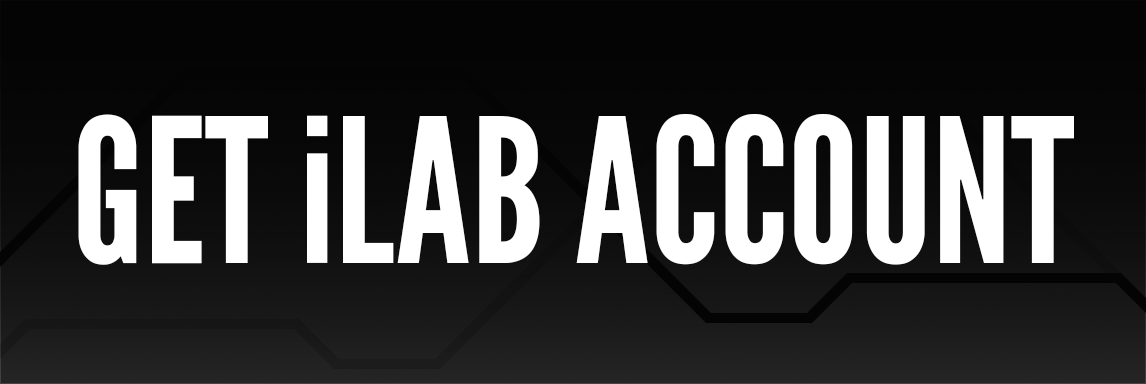
<style>
.page{position:relative;width:1146px;height:384px}
.page>*{position:absolute;margin:0}
.t1{font:200px "LeagueGothic-Regular";color:#ffffff}
</style>
<div class="page">
<p class="t1" style="left:78px;top:114px;width:996px;height:151px">GET iLAB ACCOUNT</p>
</div>
